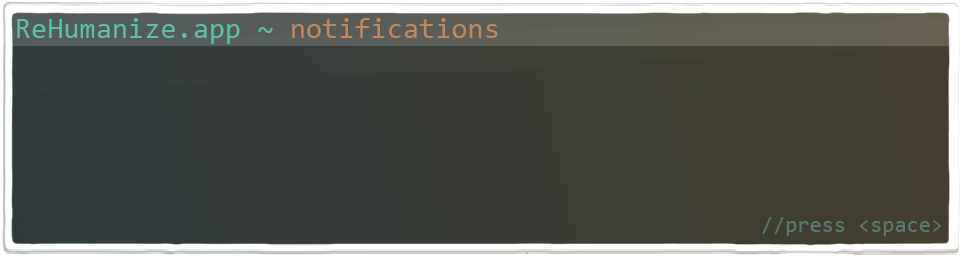
<style>
.page{position:relative;width:960px;height:256px}
.page>*{position:absolute;margin:0}
.t1{font:29.4px "Consolas";color:#59c1a7}
.t2{font:29.4px "Consolas";color:#c18859}
.t3{font:22.1px "Consolas";color:#597870}
</style>
<div class="page">
<p class="t1" style="left:17px;top:18px;width:481px;height:26px">ReHumanize.app ~ <span class="t2">notifications</span></p>
<p class="t3" style="left:762px;top:217px;width:180px;height:19px">//press &lt;space&gt;</p>
</div>
